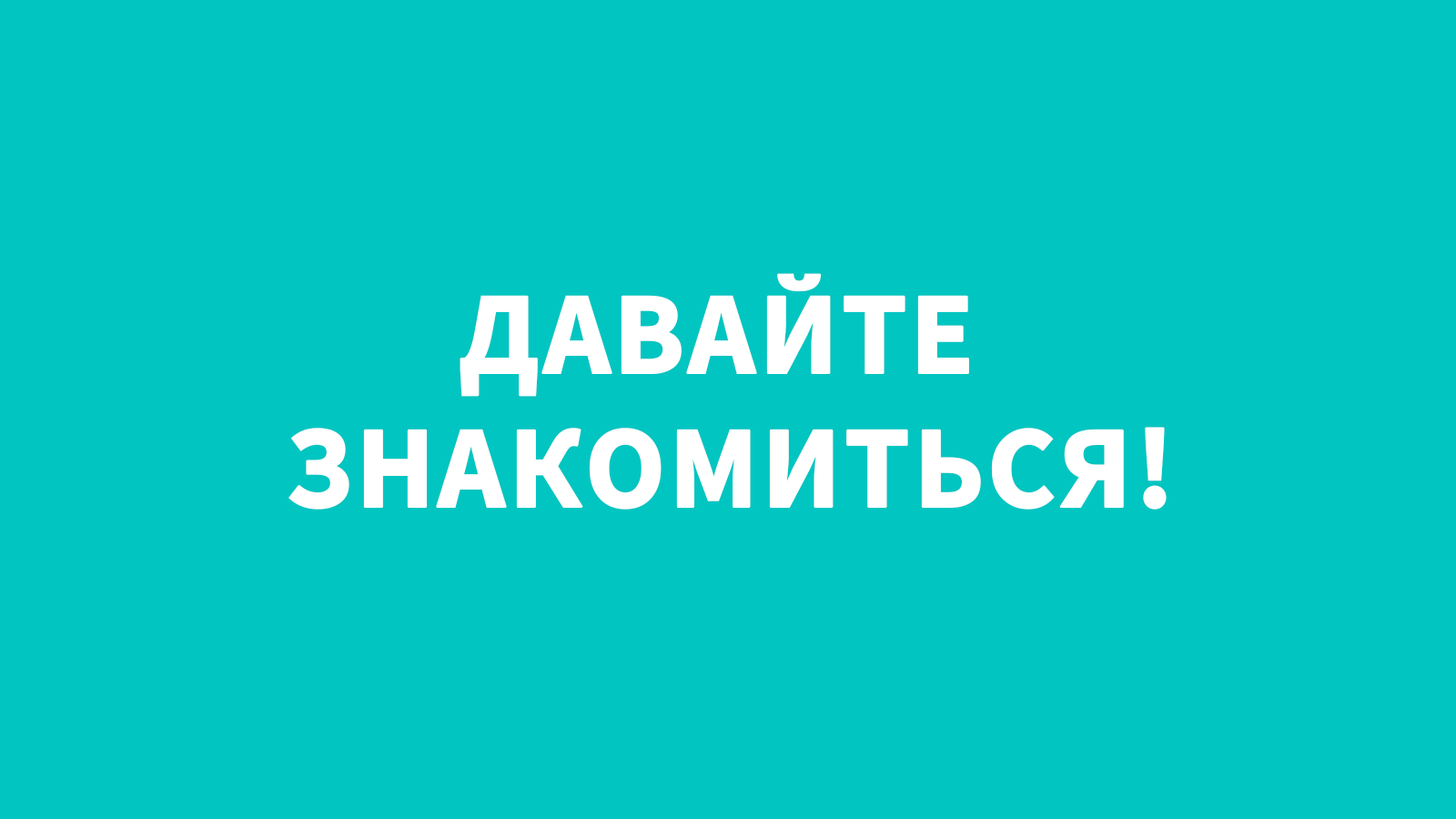
<style>
.page{position:relative;width:1456px;height:819px;background:#01c5c1}
.page>*{position:absolute;margin:0}
.t1{font:117.8px/117.8px "SourceSansPro-Bold";color:#ffffff;text-transform:uppercase;font-weight:bold}
.t2{font:117.8px/39.3px "SourceSansPro-Bold";color:#ffffff;text-transform:uppercase;font-weight:bold}
</style>
<div class="page">
<p class="t1" style="left:288px;top:273px;width:879px;height:237px;text-align:center"><span class="t2">Давайте <br></span>знакомиться!</p>
</div>
